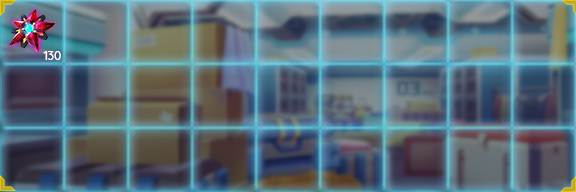
<style>
.page{position:relative;width:576px;height:192px}
.page>*{position:absolute;margin:0}
.t1{font:12px "Quicksand-Medium";color:#ffffff}
</style>
<div class="page">
<p class="t1" style="left:43px;top:51px;width:18px;height:9px">130</p>
</div>
